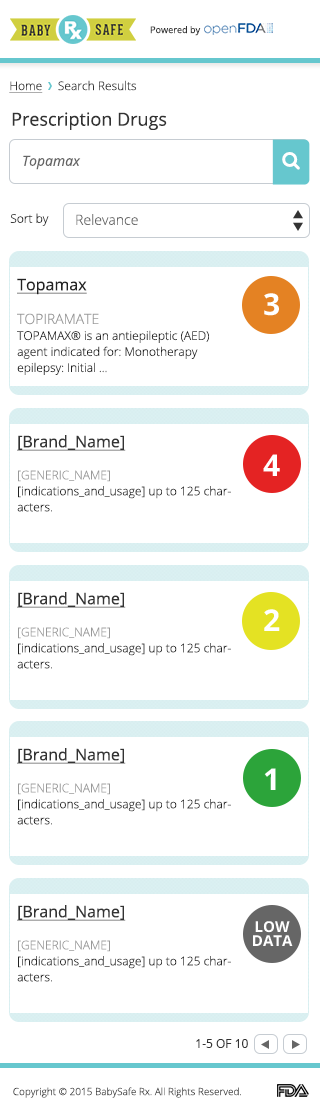
<style>
.page{position:relative;width:320px;height:1120px;background:#ffffff}
.page>*{position:absolute;margin:0}
.t1{font:9.2px "OpenSans";color:#333333}
.t2{font:12px "OpenSans-Light";color:#333333}
.t3{font:12px "OpenSans-Light";color:#333333;text-decoration:underline}
.t4{font:18px "OpenSans";color:#333333}
.t5{font:14px "OpenSans-Italic";color:#666666}
.t6{font:12px "OpenSans-Light";color:#222222}
.t7{font:14px "OpenSans-Light";color:#666666}
.t8{font:12px/16px "OpenSans-Light";color:#222222}
.t9{font:16px "OpenSans";color:#222222;text-decoration:underline}
.t10{font:14px "OpenSans-Light";color:#999999;text-transform:uppercase}
.t11{font:16px/60px "OpenSans";color:#333333;text-decoration:underline}
.t12{font:12px/16px "OpenSans-Light";color:#999999}
.t13{font:12px/16px "OpenSans-Light";color:#999999;text-transform:uppercase}
.t14{font:12px "OpenSans";color:#333333;text-transform:uppercase}
.t15{font:10px "OpenSans-Light";color:#333333}
</style>
<div class="page">
<p class="t1" style="left:150px;top:26px;width:51px;height:10px">Powered by</p>
<p class="t2" style="left:9px;top:80px;width:128px;height:13px"><span class="t3">Home</span>     Search Results</p>
<p class="t4" style="left:12px;top:112px;width:155px;height:18px">Prescription Drugs</p>
<p class="t5" style="left:23px;top:155px;width:58px;height:15px">Topamax</p>
<p class="t6" style="left:10px;top:213px;width:39px;height:13px">Sort by</p>
<p class="t7" style="left:76px;top:214px;width:62px;height:11px">Relevance</p>
<p class="t8" style="left:17px;top:278px;width:192px;height:97px"><span class="t9">Topamax<br><br></span><span class="t10">TOPIRAMATE<br></span>TOPAMAX® is an antiepileptic (AED) agent indicated for: Monotherapy epilepsy: Initial ...</p>
<p class="t8" style="left:17px;top:435px;width:214px;height:77px"><span class="t11">[Brand_Name]<br><br></span><span class="t12">[</span><span class="t13">generic_name</span><span class="t12">]<br></span>[indications_and_usage] up to 125 characters.</p>
<p class="t8" style="left:17px;top:592px;width:214px;height:77px"><span class="t11">[Brand_Name]<br><br></span><span class="t12">[</span><span class="t13">generic_name</span><span class="t12">]<br></span>[indications_and_usage] up to 125 characters.</p>
<p class="t8" style="left:17px;top:748px;width:214px;height:77px"><span class="t11">[Brand_Name]<br><br></span><span class="t12">[</span><span class="t13">generic_name</span><span class="t12">]<br></span>[indications_and_usage] up to 125 characters.</p>
<p class="t8" style="left:17px;top:905px;width:214px;height:77px"><span class="t11">[Brand_Name]<br><br></span><span class="t12">[</span><span class="t13">generic_name</span><span class="t12">]<br></span>[indications_and_usage] up to 125 characters.</p>
<p class="t14" style="left:196px;top:1039px;width:52px;height:9px">1-5 of 10</p>
<p class="t15" style="left:13px;top:1087px;width:228px;height:11px">Copyright © 2015 BabySafe Rx. All Rights Reserved.</p>
</div>
